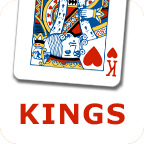
<style>
.page{position:relative;width:144px;height:144px;background:#ffffff}
.page>*{position:absolute;margin:0}
.t1{font:27.9px "Verdana-Bold";letter-spacing:0.05em;color:#d02000}
</style>
<div class="page">
<p class="t1" style="left:20px;top:103px;width:105px;height:22px">KINGS</p>
</div>
